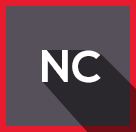
<style>
.page{position:relative;width:136px;height:132px;background:#56505b}
.page>*{position:absolute;margin:0}
.t1{font:44.4px "NexaBold";color:#ffffff}
</style>
<div class="page">
<p class="t1" style="left:42px;top:50px;width:59px;height:33px">NC</p>
</div>
